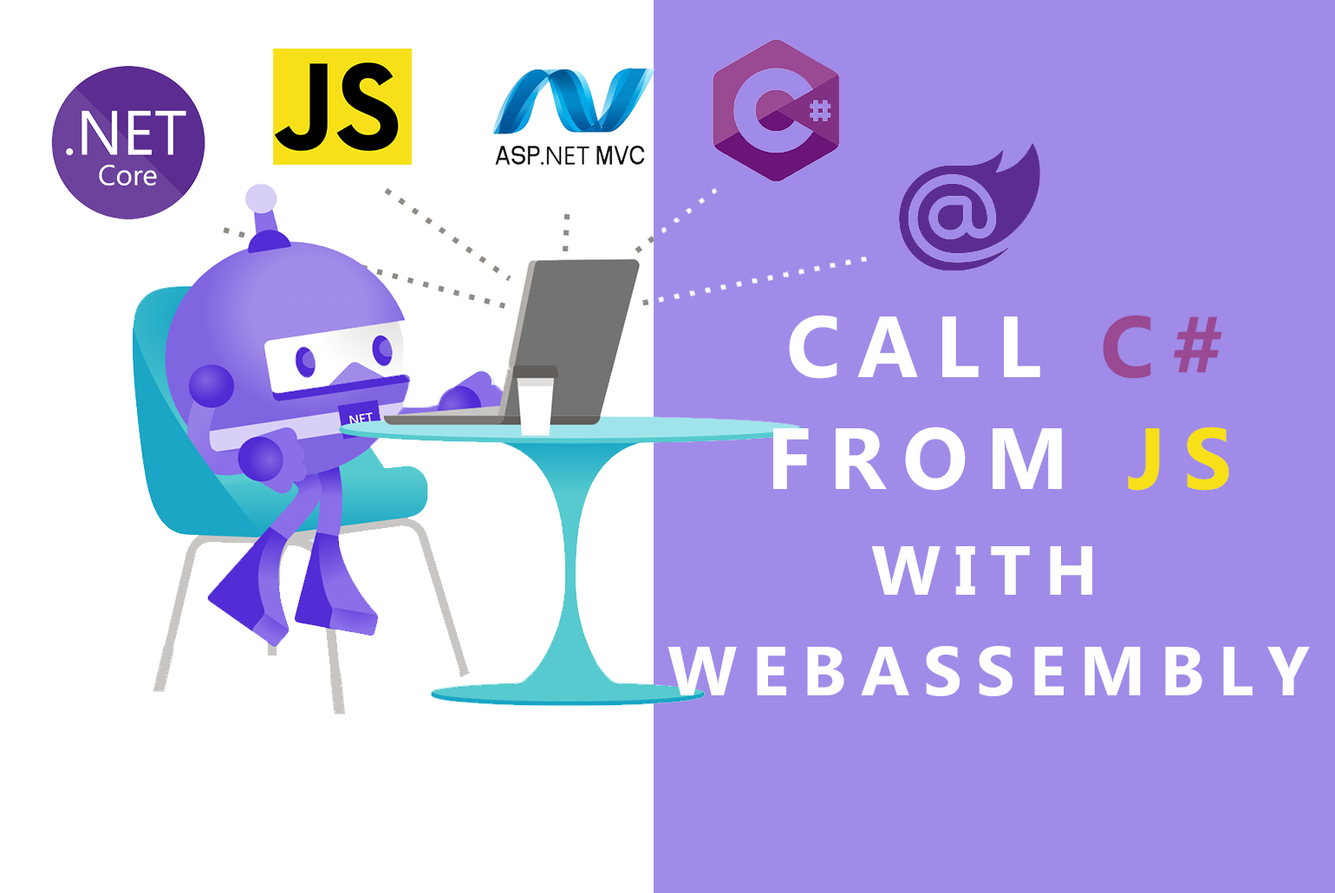
<style>
.page{position:relative;width:1335px;height:893px;background:#a08be8}
.page>*{position:absolute;margin:0}
.t1{font:86.7px "MicrosoftPhagsPa-Bold";letter-spacing:0.2em;color:#ffffff}
.t2{font:86.7px "MicrosoftPhagsPa-Bold";letter-spacing:0.2em;color:#9a4993}
.t3{font:86.7px "MicrosoftPhagsPa-Bold";letter-spacing:0.2em;color:#f7e018}
.t4{font:69.4px "MicrosoftPhagsPa-Bold";letter-spacing:0.2em;color:#ffffff}
</style>
<div class="page">
<p class="t1" style="left:789px;top:315px;width:434px;height:64px">CALL <span class="t2">C#</span></p>
<p class="t1" style="left:773px;top:427px;width:456px;height:64px">FROM <span class="t3">JS</span></p>
<p class="t4" style="left:871px;top:546px;width:221px;height:49px">WITH</p>
<p class="t4" style="left:668px;top:646px;width:642px;height:50px">WEBASSEMBLY</p>
</div>
